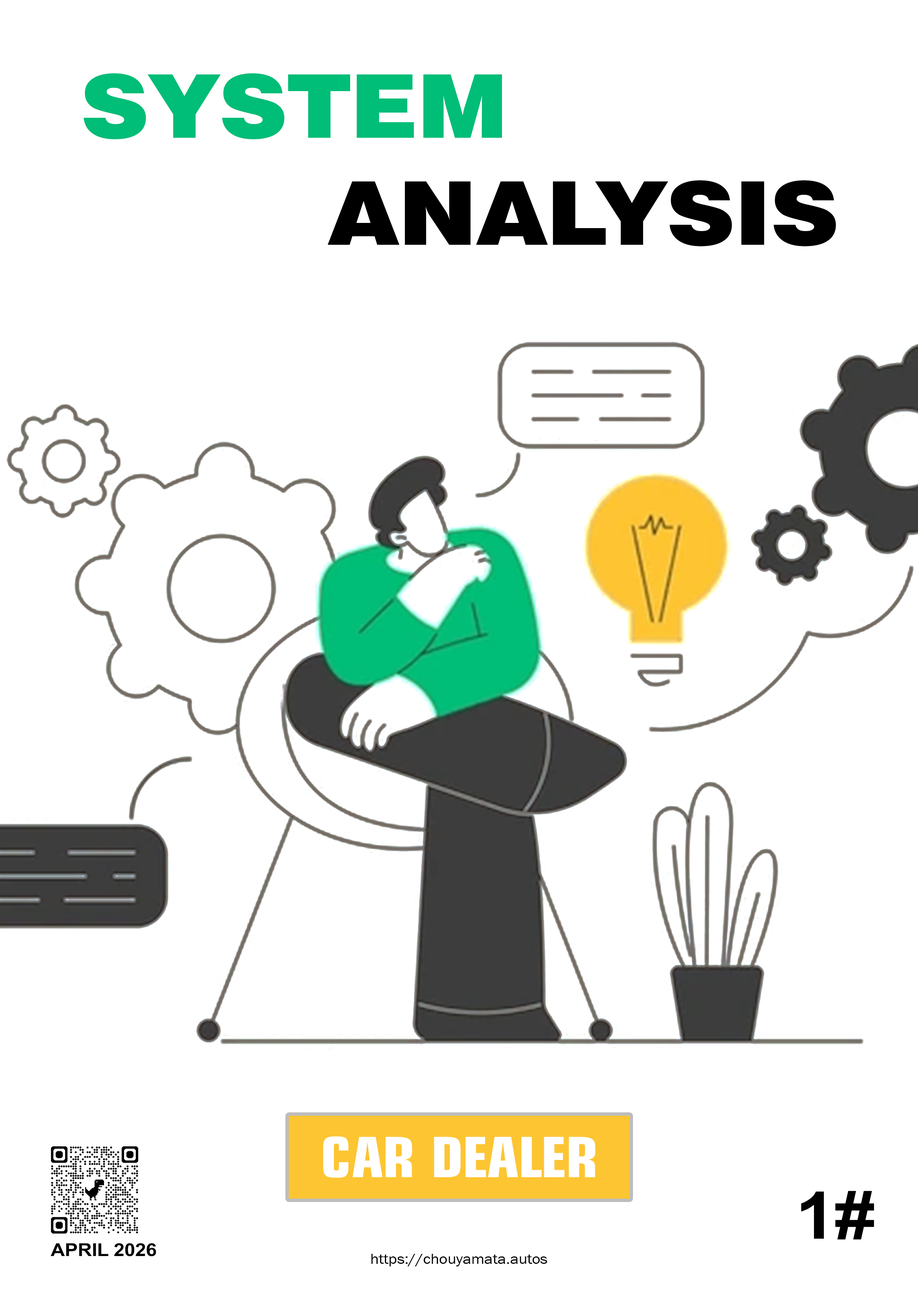
<style>
.page{position:relative;width:918px;height:1299px;background:#ffffff}
.page>*{position:absolute;margin:0}
.t1{font:88.1px "Swiss721BT-Black";letter-spacing:-0.01em;color:#00bd77;scale:1.1 1}
.t2{font:88.1px "Swiss721BT-Black";letter-spacing:-0.01em;color:#000000;scale:1.1 1}
.t3{font:55.4px "AKbalthomMolleak2";letter-spacing:-0.01em;color:#ffffff;scale:1.1 1}
.t4{font:65.5px "Ah-One";letter-spacing:-0.01em;color:#000000;scale:1.1 1}
.t5{font:17.9px "Ah-One";letter-spacing:-0.01em;color:#000000;scale:1.1 1}
.t6{font:14.9px "AA-Khmer-AngDaunTep";letter-spacing:-0.01em;color:#000000;scale:1.1 1}
</style>
<div class="page">
<p class="t1" style="left:83px;top:73px;width:419px;height:66px">SYSTEM</p>
<p class="t2" style="left:328px;top:180px;width:508px;height:66px">ANALYSIS</p>
<p class="t3" style="left:323px;top:1136px;width:273px;height:42px">CAR DEALER</p>
<p class="t4" style="left:801px;top:1191px;width:73px;height:49px">1#</p>
<p class="t5" style="left:51px;top:1243px;width:105px;height:13px">APRIL 2026</p>
<p class="t6" style="left:371px;top:1254px;width:176px;height:12px">https://chouyamata.autos</p>
</div>
